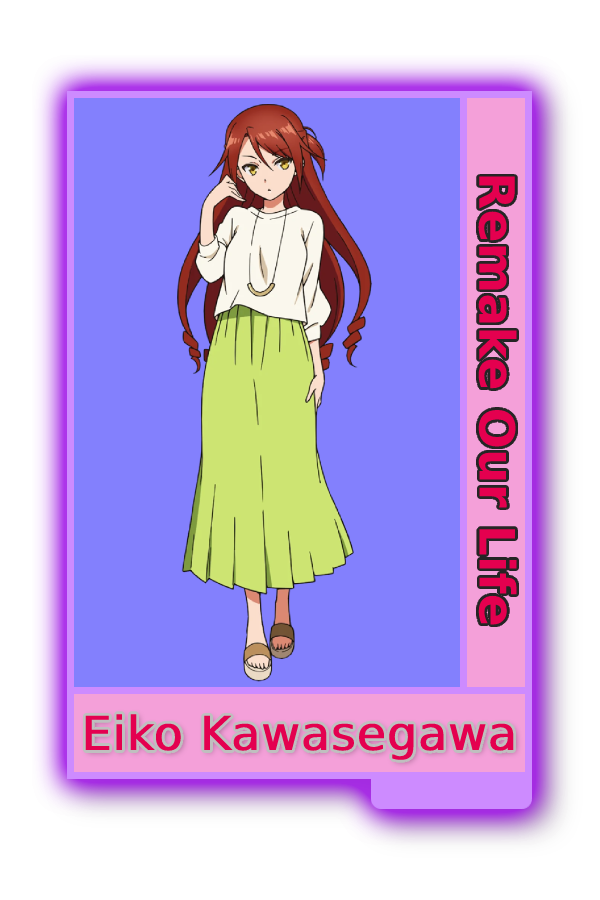
<style>
.page{position:relative;width:600px;height:900px;background:#8380fd}
.page>*{position:absolute;margin:0}
.t1{font:48.8px "MADETOMMY-Bold";color:#e4004f}
.t2{font:47px "CoolveticaRg-Regular";color:#e4004f;font-weight:bold}
</style>
<div class="page">
<p class="t1" style="left:478px;top:176px;width:39px;height:449px;rotate:90deg">Remake Our Life</p>
<p class="t2" style="left:85px;top:714px;width:429px;height:46px">Eiko Kawasegawa</p>
</div>
